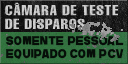
<style>
.page{position:relative;width:128px;height:64px}
.page>*{position:absolute;margin:0}
.t1{font:14px "Helvetica-Compressed";letter-spacing:0.049em;color:#cfcfcf;text-transform:uppercase;scale:1.15 1}
.t2{font:11.8px/13.3px "GRReadOne";letter-spacing:0.03em;color:#060e08;text-transform:uppercase;font-weight:bold;scale:0.93 1}
</style>
<div class="page">
<p class="t1" style="left:5px;top:2px;width:113px;height:14px">câmara de teste</p>
<p class="t1" style="left:5px;top:18px;width:80px;height:11px">de disparos</p>
<p class="t2" style="left:6px;top:36px;width:118px;height:24px">somente pessoal<br>equipado com pcv</p>
</div>
